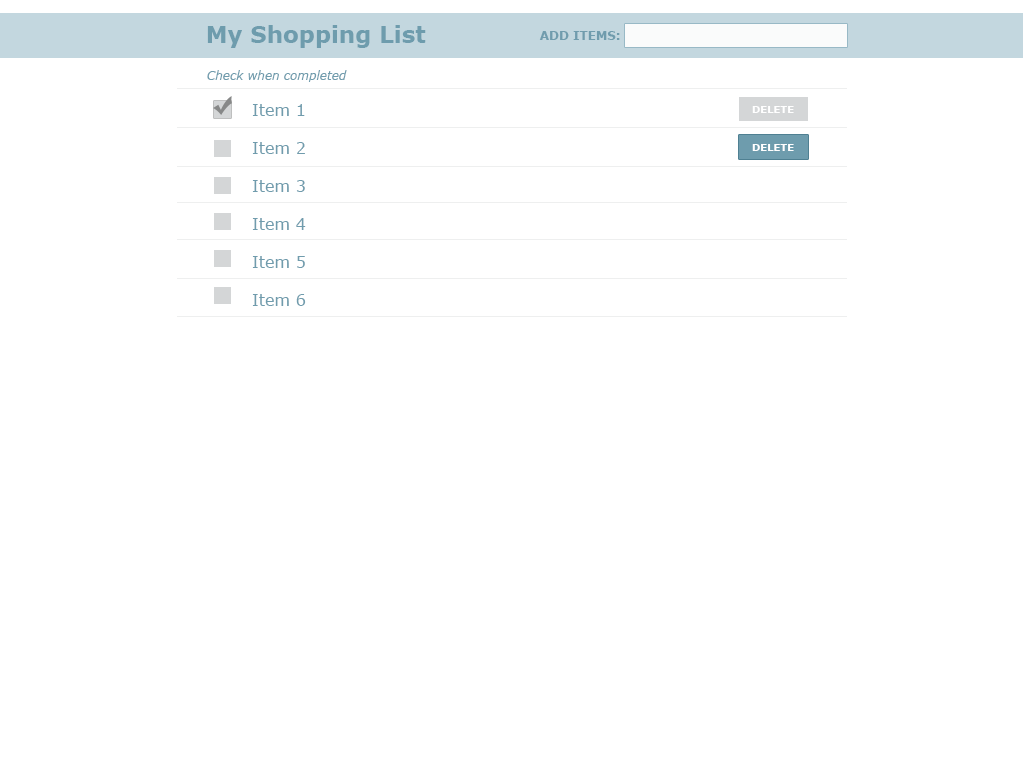
<style>
.page{position:relative;width:1024px;height:768px;background:#ffffff}
.page>*{position:absolute;margin:0}
.t1{font:23px "Verdana-Bold";color:#709cad}
.t2{font:12px "Verdana-Bold";color:#709cad;text-transform:uppercase}
.t3{font:12px "Verdana-Italic";color:#709cad}
.t4{font:16px/38px "Verdana";color:#709cad}
.t5{font:10px "Verdana-Bold";color:#ffffff;text-transform:uppercase}
</style>
<div class="page">
<p class="t1" style="left:207px;top:25px;width:219px;height:23px">My Shopping List</p>
<p class="t2" style="left:539px;top:31px;width:81px;height:9px">Add Items:</p>
<p class="t3" style="left:207px;top:70px;width:140px;height:12px">Check when completed</p>
<p class="t4" style="left:252px;top:104px;width:54px;height:202px">Item 1<br>Item 2<br>Item 3<br>Item 4<br>Item 5<br>Item 6</p>
<p class="t5" style="left:752px;top:106px;width:42px;height:7px">Delete</p>
<p class="t5" style="left:752px;top:144px;width:42px;height:7px">Delete</p>
</div>
